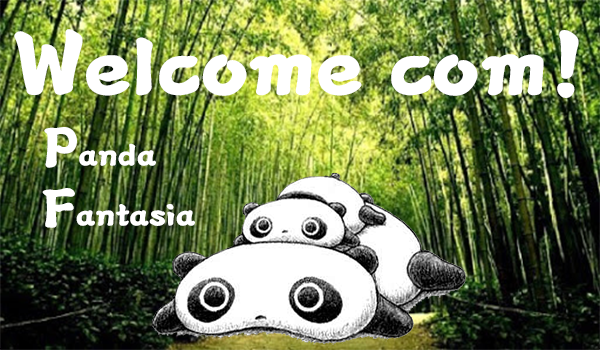
<style>
.page{position:relative;width:600px;height:350px}
.page>*{position:absolute;margin:0}
.t1{font:80px "Yj-BACDOO-Bold";color:#ffffff}
.t2{font:30px "Yj-BACDOO-Bold";color:#ffffff}
.t3{font:50px "Yj-BACDOO-Bold";color:#ffffff}
</style>
<div class="page">
<p class="t1" style="left:14px;top:29px;width:565px;height:69px">Welcome com!</p>
<p class="t2" style="left:42px;top:127px;width:153px;height:101px;text-align:justify"><span class="t3">P</span>anda<br><span class="t3">F</span>antasia</p>
</div>
